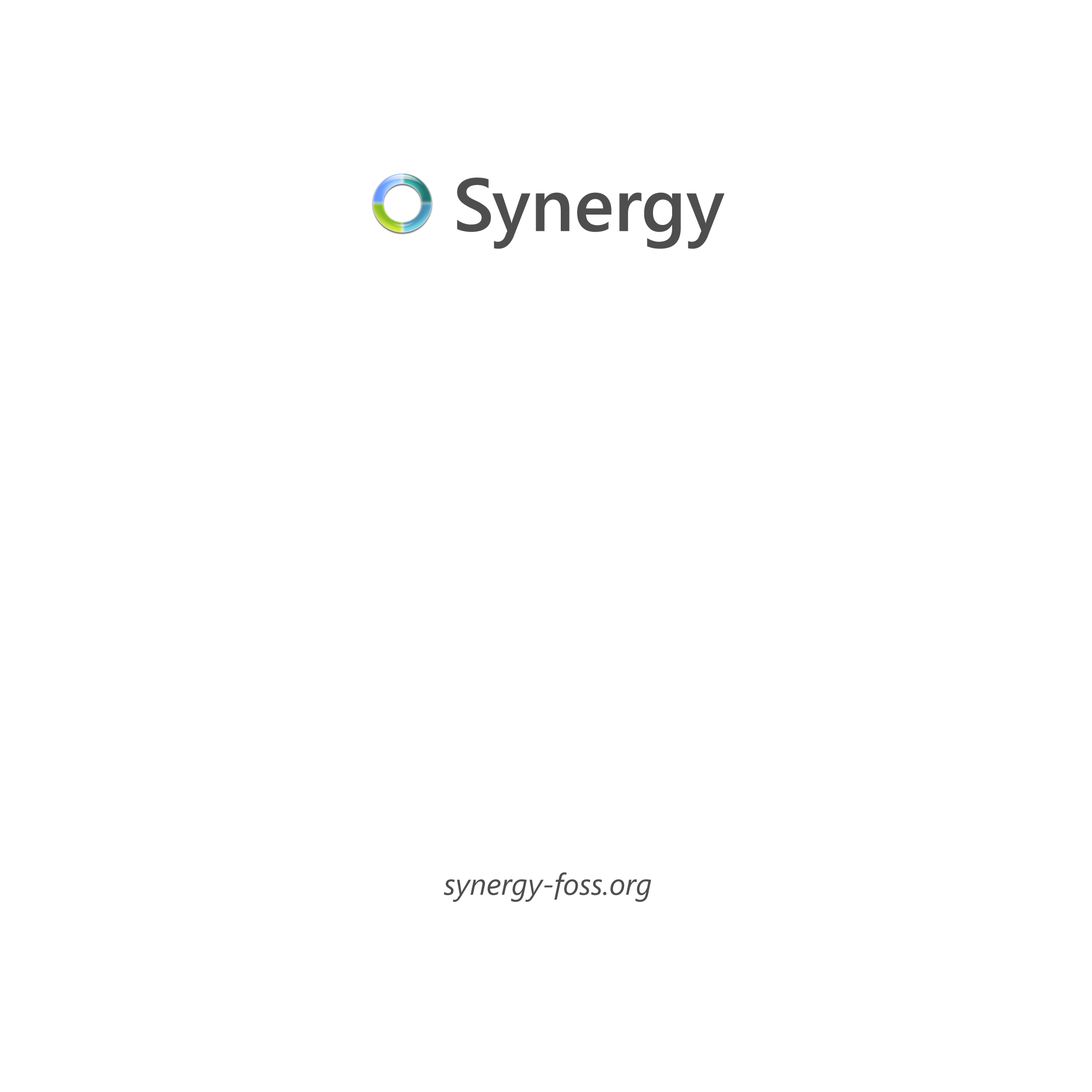
<style>
.page{position:relative;width:1092px;height:1092px;background:#ffffff}
.page>*{position:absolute;margin:0}
.t1{font:75px "SegoeUI-SemiBold";color:#4e4e4e}
.t2{font:30px "SegoeUI-Italic";color:#4e4e4e}
</style>
<div class="page">
<p class="t1" style="left:457px;top:177px;width:268px;height:72px">Synergy</p>
<p class="t2" style="left:444px;top:872px;width:207px;height:30px">synergy-foss.org</p>
</div>
